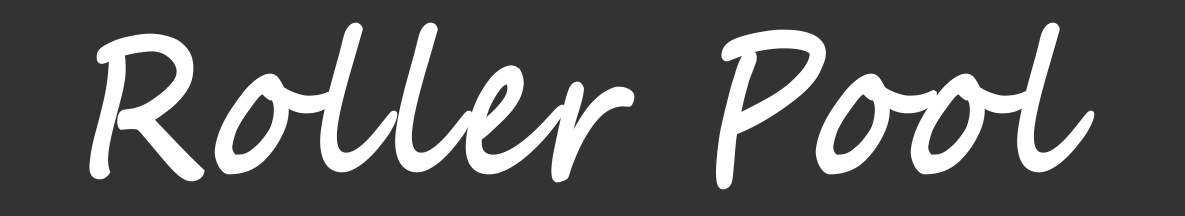
<style>
.page{position:relative;width:1185px;height:216px;background:#333333}
.page>*{position:absolute;margin:0}
.t1{font:195px "SegoeScript";letter-spacing:0.025em;color:#ffffff;font-weight:bold;font-style:italic;scale:0.77 1}
</style>
<div class="page">
<p class="t1" style="left:89px;top:22px;width:1006px;height:168px">Roller Pool</p>
</div>
